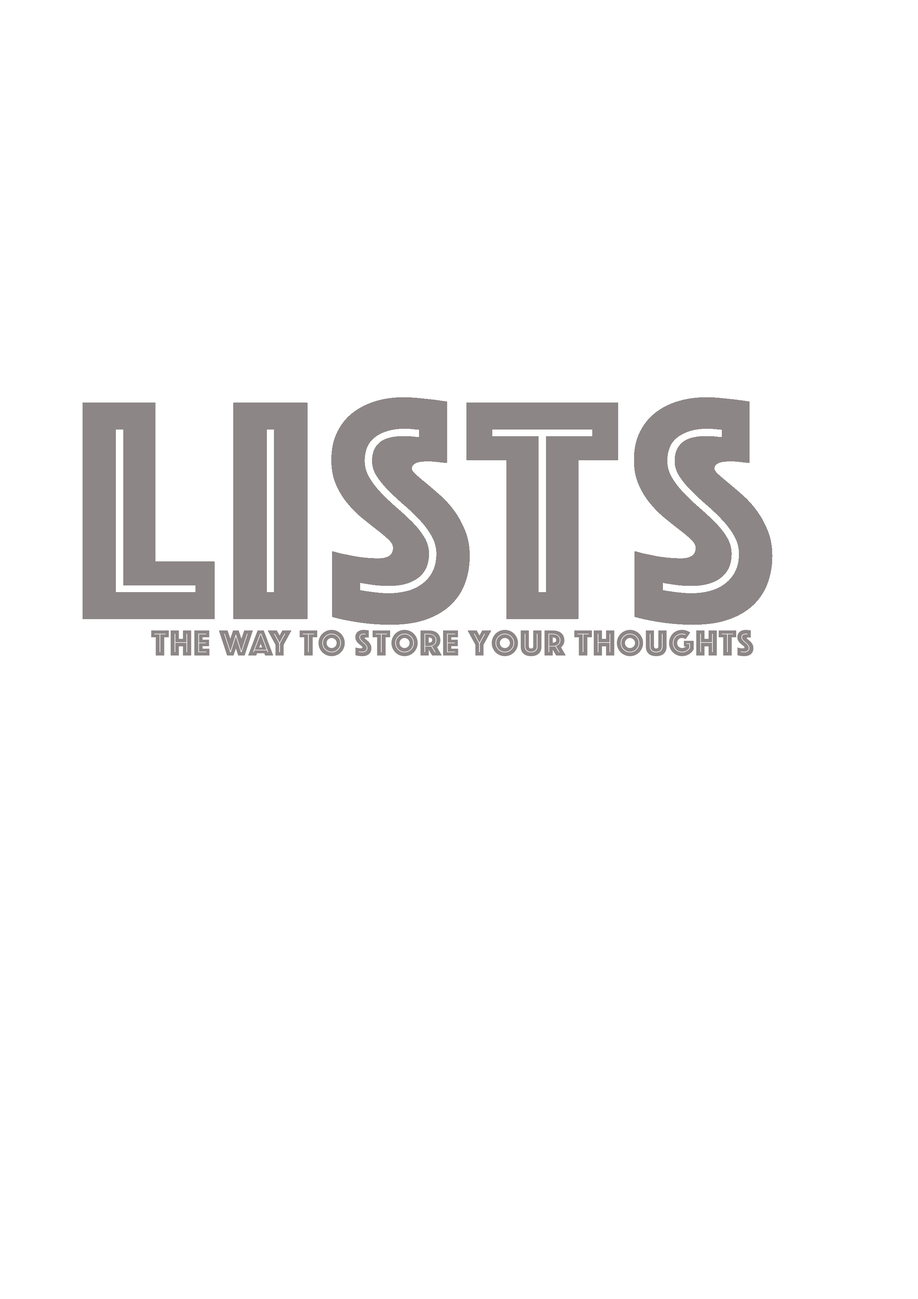
<style>
.page{position:relative;width:918px;height:1299px;background:#ffffff}
.page>*{position:absolute;margin:0}
.t1{font:37px "Phosphate-Inline";color:#8d8686;font-weight:bold}
</style>
<div class="page">
<p class="t1" style="left:151px;top:630px;width:603px;height:26px">The way to store your thoughts</p>
</div>
